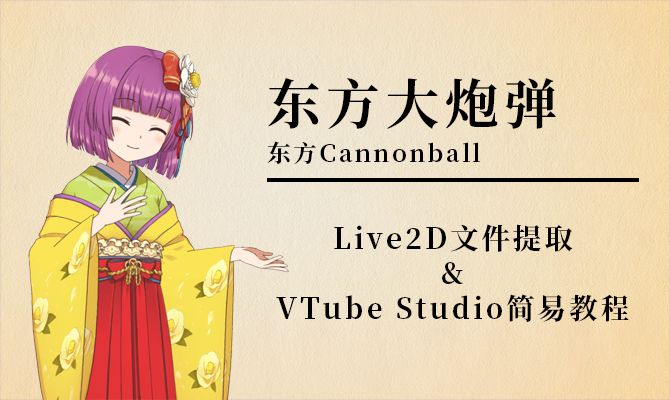
<style>
.page{position:relative;width:670px;height:400px}
.page>*{position:absolute;margin:0}
.t1{font:23.8px/64.2px "NotoSerifSC-Bold";letter-spacing:0.1em;color:#000000}
.t2{font:54px/64.2px "NotoSerifSC-Bold";letter-spacing:0.1em;color:#000000}
.t3{font:28.6px/34.9px "NotoSerifSC-Bold";letter-spacing:0.1em;color:#000000}
</style>
<div class="page">
<p class="t1" style="left:267px;top:78px;width:289px;height:87px"><span class="t2">东方大炮弹<br></span>东方Cannonball</p>
<p class="t3" style="left:276px;top:224px;width:353px;height:98px;text-align:center">Live2D文件提取<br>&amp;<br>VTube Studio简易教程</p>
</div>
